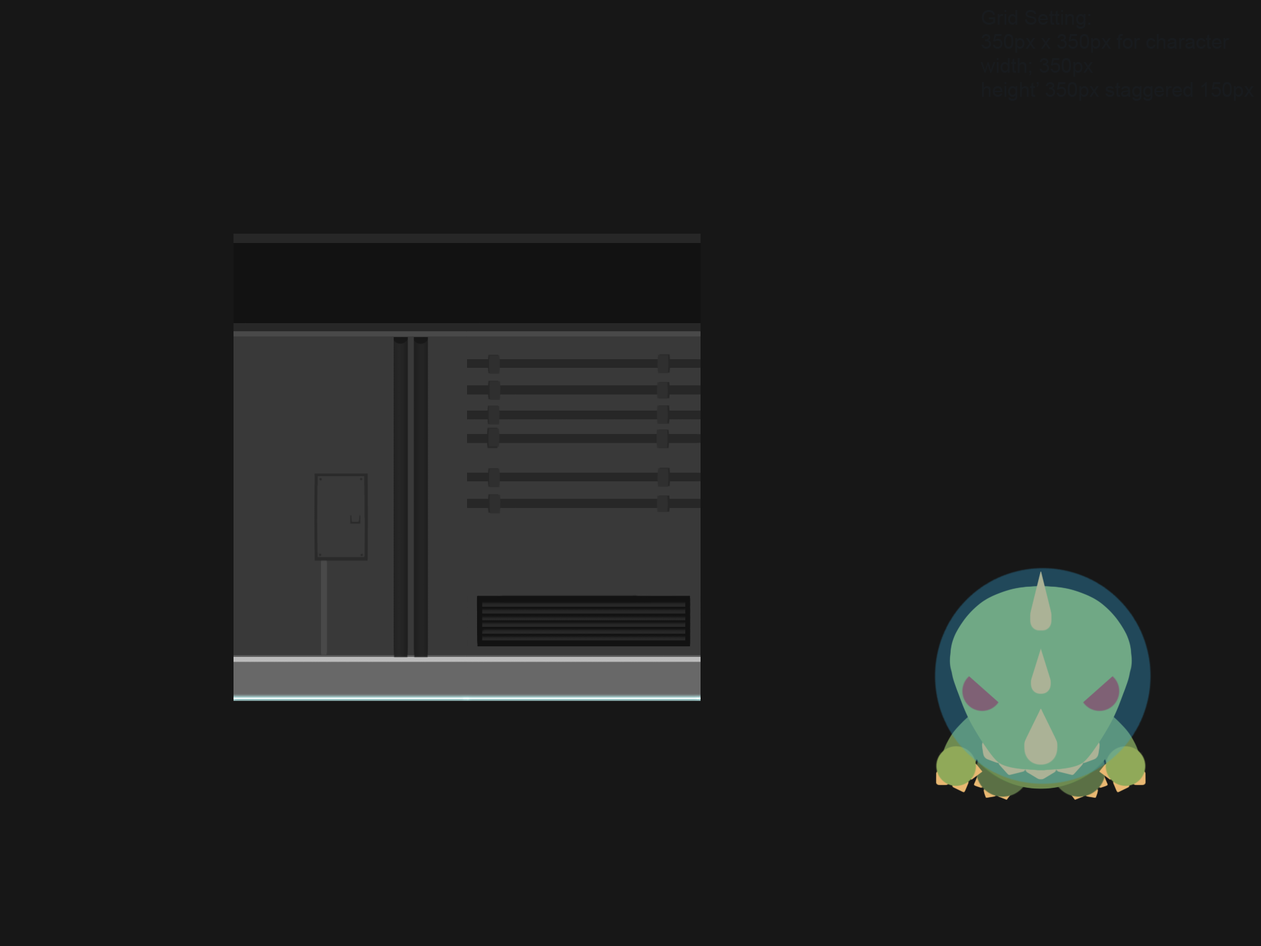
<style>
.page{position:relative;width:1261px;height:946px;background:#171717}
.page>*{position:absolute;margin:0}
.t1{font:20px "ArialMT";color:#181b1e}
</style>
<div class="page">
<p class="t1" style="left:981px;top:10px;width:273px;height:91px">Grid Setting:<br>350px x 350px for character<br>width; 350px<br>height’ 350px staggered 150px</p>
</div>
